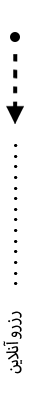
<style>
.page{position:relative;width:30px;height:400px;background:#ffffff}
.page>*{position:absolute;margin:0}
.t1{font:36.5px "MyriadArabic-Regular";letter-spacing:-0.02em;color:#000000}
.t2{font:22.4px "MyriadArabic-Regular";letter-spacing:-0.02em;color:#000000}
</style>
<div class="page">
<p class="t1" style="left:14px;top:144px;width:4px;height:141px;rotate:90deg">. . . . . . . . . . . . . .</p>
<p class="t2" style="left:3px;top:311px;width:20px;height:63px;rotate:-90deg">رزرو آنلاین</p>
</div>
